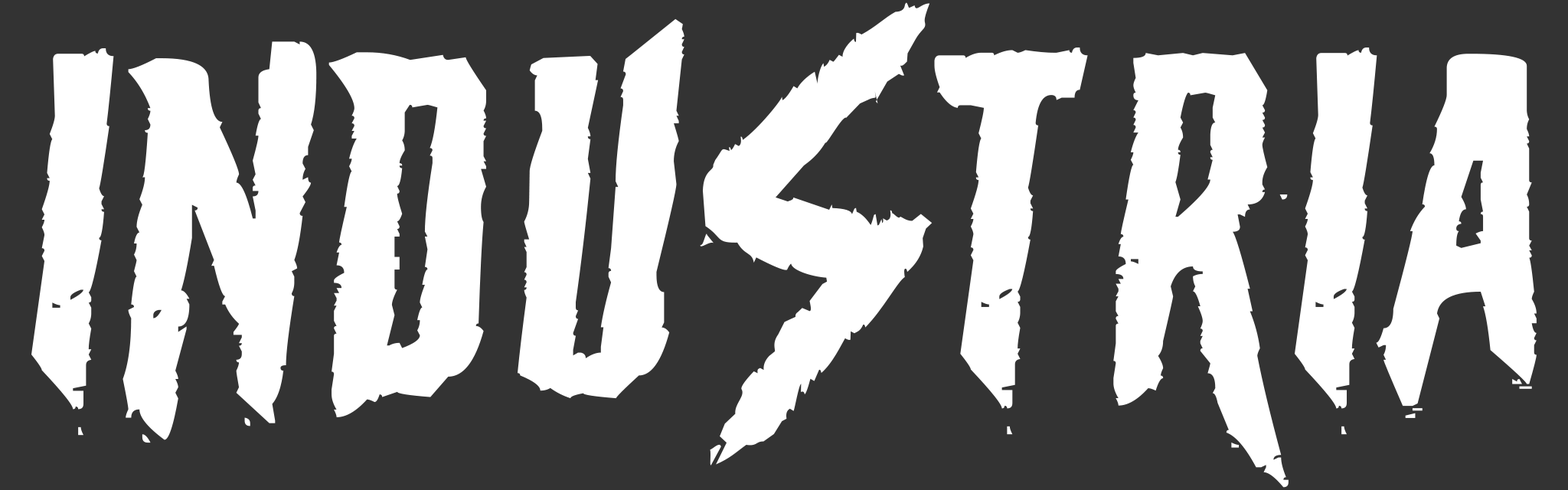
<style>
.page{position:relative;width:1568px;height:490px;background:#333333}
.page>*{position:absolute;margin:0}
.t1{font:486px "TheMacabre";letter-spacing:0.06em;color:#ffffff}
</style>
<div class="page">
<p class="t1" style="left:31px;top:18px;width:653px;height:425px">INDU</p>
<p class="t1" style="left:934px;top:47px;width:603px;height:441px">TRIA</p>
</div>
